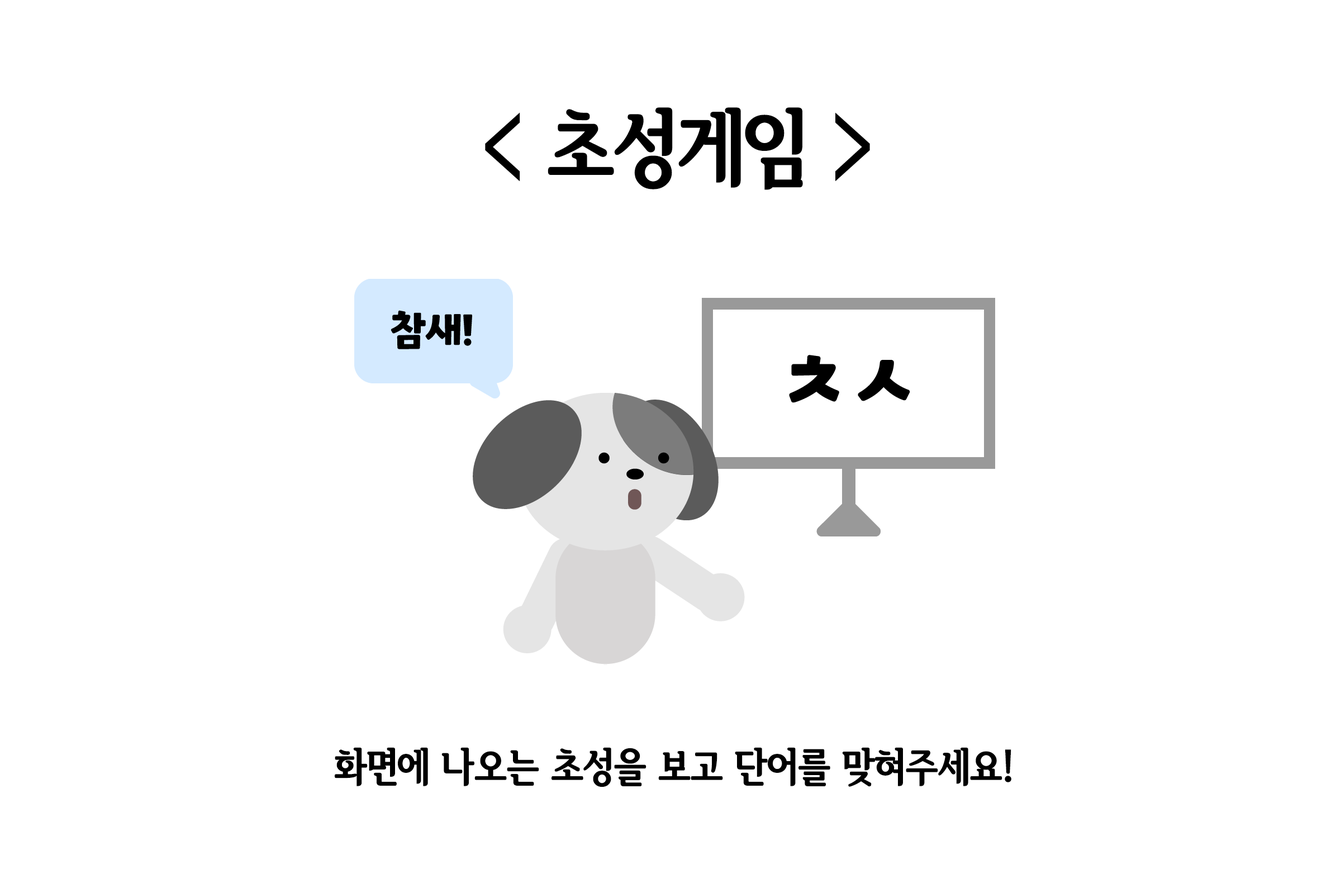
<style>
.page{position:relative;width:1336px;height:893px;background:#ffffff}
.page>*{position:absolute;margin:0}
.t1{font:83.8px "SeoulHangangCBL";color:#000000}
.t2{font:40.2px "SeoulHangangCBL";color:#000000}
</style>
<div class="page">
<p class="t1" style="left:485px;top:107px;width:385px;height:83px">&lt; 초성게임 &gt;</p>
<p class="t2" style="left:335px;top:747px;width:676px;height:40px">화면에 나오는 초성을 보고 단어를 맞혀주세요!</p>
</div>
